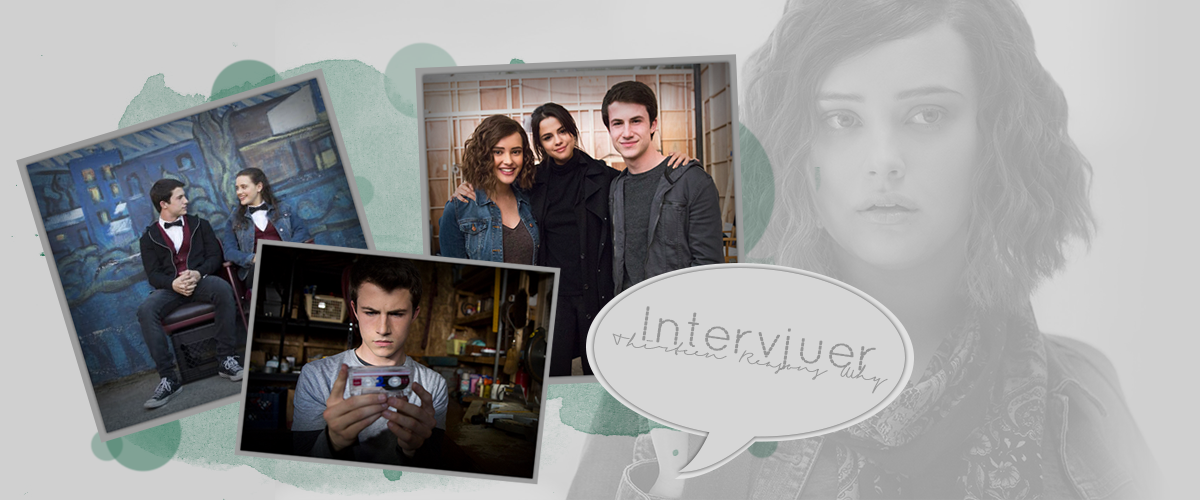
<style>
.page{position:relative;width:1200px;height:500px}
.page>*{position:absolute;margin:0}
.t1{font:48px "QuicksandDash-Regular";color:#959595;font-weight:bold}
.t2{font:15px "SignericaThin";color:#959595;font-weight:bold}
</style>
<div class="page">
<p class="t1" style="left:642px;top:306px;width:234px;height:65px;rotate:8deg">Intervjuer</p>
<p class="t2" style="left:612px;top:332px;width:276px;height:62px;rotate:8deg">Thirteen Reasons Why</p>
</div>
